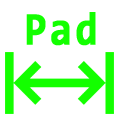
<style>
.page{position:relative;width:120px;height:120px;background:#ffffff}
.page>*{position:absolute;margin:0}
.t1{font:46.6px "Consolas-Bold";letter-spacing:0.05em;color:#13ff00;font-weight:bold;scale:0.86 1}
</style>
<div class="page">
<p class="t1" style="left:26px;top:12px;width:70px;height:34px">Pad</p>
</div>
